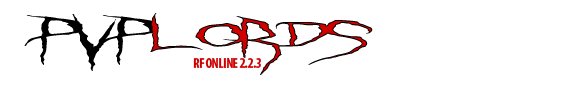
<style>
.page{position:relative;width:562px;height:86px;background:#ffffff}
.page>*{position:absolute;margin:0}
.t1{font:48px "GhastlyPanic";letter-spacing:-0.04em;color:#d00000;scale:4.22 1}
.t2{font:48px "GhastlyPanic";letter-spacing:-0.04em;color:#000000;scale:4.22 1}
.t3{font:14px "MyriadPro-BoldCond";letter-spacing:-0.04em;color:#ce0000}
</style>
<div class="page">
<p class="t1" style="left:24px;top:13px;width:349px;height:62px"><span class="t2">PvP</span>LOrds</p>
<p class="t3" style="left:193px;top:58px;width:68px;height:10px">RF ONLINE 2.2.3</p>
</div>
